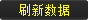
<style>
.page{position:relative;width:88px;height:20px;background:#2a2a2a}
.page>*{position:absolute;margin:0}
.t1{font:12px "SimSun";letter-spacing:0.1em;color:#ffff00}
</style>
<div class="page">
<p class="t1" style="left:19px;top:4px;width:50px;height:12px">刷新数据</p>
</div>
